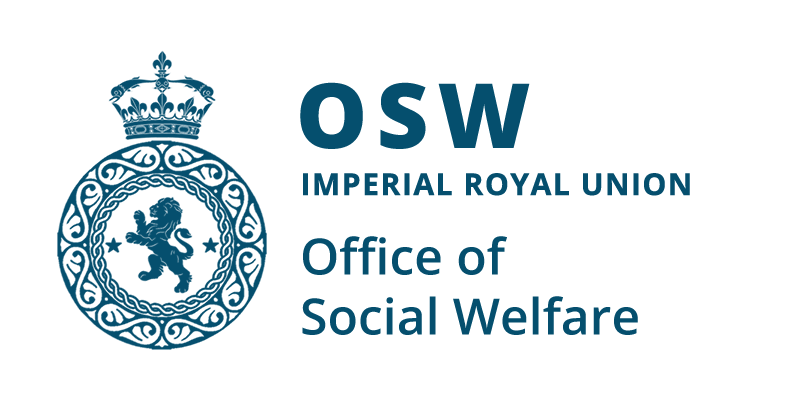
<style>
.page{position:relative;width:800px;height:400px;background:#ffffff}
.page>*{position:absolute;margin:0}
.t1{font:90px "OpenSans-ExtraBold";letter-spacing:0.1em;color:#054f6e}
.t2{font:30px "OpenSans-Bold";letter-spacing:0.025em;color:#054f6e;text-transform:uppercase;font-weight:bold}
.t3{font:50px/60px "OpenSans-SemiBold";color:#054f6e}
</style>
<div class="page">
<p class="t1" style="left:300px;top:82px;width:230px;height:67px">OSW</p>
<p class="t2" style="left:303px;top:173px;width:387px;height:23px">imperial royal union</p>
<p class="t3" style="left:302px;top:236px;width:336px;height:99px">Office of<br>Social Welfare</p>
</div>
